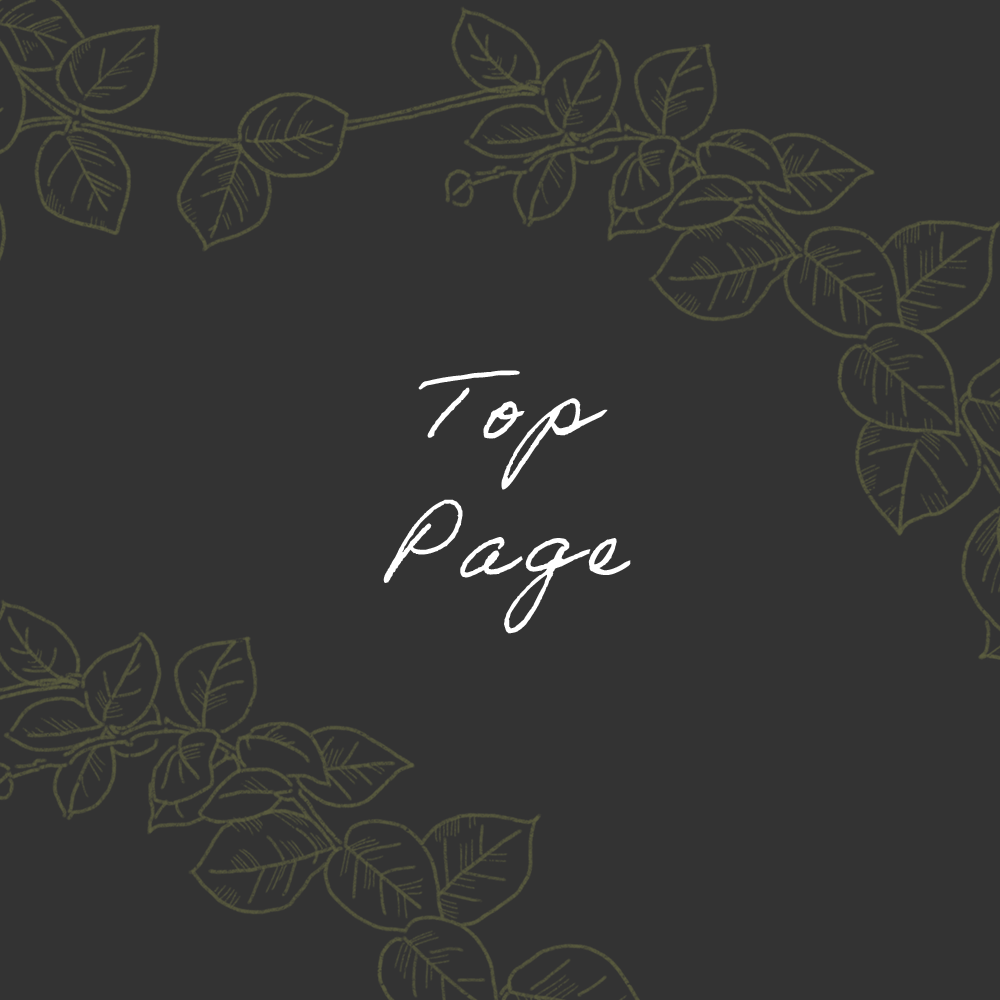
<style>
.page{position:relative;width:1000px;height:1000px;background:#333333}
.page>*{position:absolute;margin:0}
.t1{font:98.5px/136.9px "AdobeHandwriting-Ernie";letter-spacing:0.1em;color:#ffffff}
</style>
<div class="page">
<p class="t1" style="left:383px;top:370px;width:248px;height:264px;text-align:center">Top<br>Page</p>
</div>
